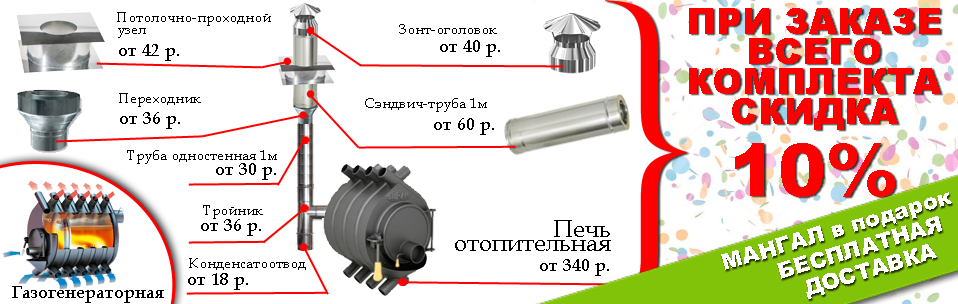
<style>
.page{position:relative;width:958px;height:304px;background:#ffffff}
.page>*{position:absolute;margin:0}
.t1{font:14px/12px "BookAntiqua";color:#000000}
.t2{font:36px/30px "Arial-Black";color:#ff0000}
.t3{font:14px "BookAntiqua";color:#000000}
.t4{font:18px "BookAntiqua";color:#000000}
.t5{font:12px "BookAntiqua";color:#000000}
.t6{font:72px "Arial-Black";color:#ff0000}
.t7{font:22px/24px "Arial-Black";color:#ffffff}
.t8{font:22px/18px "Arial-Black";color:#ffffff}
.t9{font:24px/14px "BookAntiqua";color:#000000}
</style>
<div class="page">
<p class="t1" style="left:117px;top:12px;width:154px;height:26px">Потолочно-проходной<br>узел</p>
<p class="t2" style="left:689px;top:8px;width:252px;height:122px;text-align:center">ПРИ ЗАКАЗЕ<br>ВСЕГО<br>КОМПЛЕКТА<br>СКИДКА</p>
<p class="t3" style="left:399px;top:24px;width:98px;height:10px">Зонт-оголовок</p>
<p class="t4" style="left:440px;top:40px;width:60px;height:17px">от 40 р.</p>
<p class="t4" style="left:119px;top:44px;width:60px;height:17px">от 42 р.</p>
<p class="t3" style="left:119px;top:93px;width:82px;height:14px">Переходник</p>
<p class="t3" style="left:365px;top:98px;width:122px;height:14px"><span class="t5"><br></span>Сэндвич-труба 1м</p>
<p class="t4" style="left:120px;top:112px;width:60px;height:17px">от 36 р.</p>
<p class="t4" style="left:434px;top:118px;width:60px;height:17px">от 60 р.</p>
<p class="t3" style="left:127px;top:150px;width:150px;height:14px"><span class="t5"><br></span>Труба одностенная 1м</p>
<p class="t6" style="left:735px;top:143px;width:160px;height:54px">10%</p>
<p class="t4" style="left:216px;top:163px;width:60px;height:17px">от 30 р.</p>
<p class="t7" style="left:721px;top:192px;width:231px;height:107px;text-align:center;rotate:-16deg"><span class="t8"><br>          </span>МАНГАЛ в подарок<br>               БЕСПЛАТНАЯ <br>                ДОСТАВКА</p>
<p class="t3" style="left:203px;top:205px;width:60px;height:14px"><span class="t5"><br></span>Тройник</p>
<p class="t4" style="left:201px;top:219px;width:60px;height:17px">от 36 р.</p>
<p class="t9" style="left:455px;top:220px;width:156px;height:31px;text-align:right">Печь<br> отопительная</p>
<p class="t3" style="left:189px;top:258px;width:117px;height:12px"><span class="t5"><br></span>Конденсатоотвод</p>
<p class="t4" style="left:540px;top:259px;width:69px;height:17px">от 340 р.</p>
<p class="t4" style="left:188px;top:273px;width:60px;height:17px">от 18 р.</p>
<p class="t4" style="left:12px;top:286px;width:152px;height:17px">Газогенераторная печь</p>
</div>
